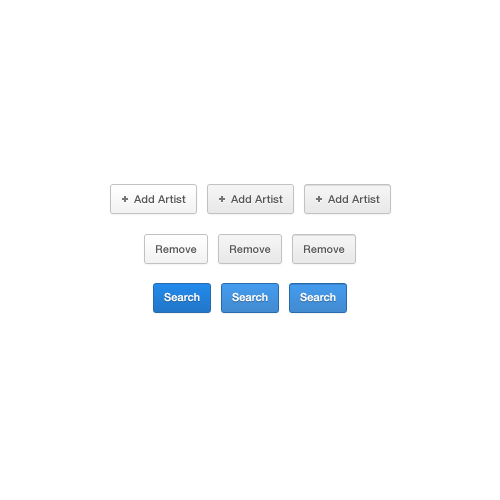
<style>
.page{position:relative;width:500px;height:500px;background:#ffffff}
.page>*{position:absolute;margin:0}
.t1{font:11px "HelveticaNeue-Medium";color:#555555}
.t2{font:11px "HelveticaNeue-Medium";color:#ffffff}
</style>
<div class="page">
<p class="t1" style="left:134px;top:195px;width:52px;height:8px">Add Artist</p>
<p class="t1" style="left:231px;top:195px;width:52px;height:8px">Add Artist</p>
<p class="t1" style="left:328px;top:195px;width:52px;height:8px">Add Artist</p>
<p class="t1" style="left:156px;top:245px;width:41px;height:8px">Remove</p>
<p class="t1" style="left:230px;top:245px;width:41px;height:8px">Remove</p>
<p class="t1" style="left:304px;top:245px;width:41px;height:8px">Remove</p>
<p class="t2" style="left:164px;top:292px;width:36px;height:10px">Search</p>
<p class="t2" style="left:232px;top:292px;width:36px;height:10px">Search</p>
<p class="t2" style="left:300px;top:292px;width:36px;height:10px">Search</p>
</div>
